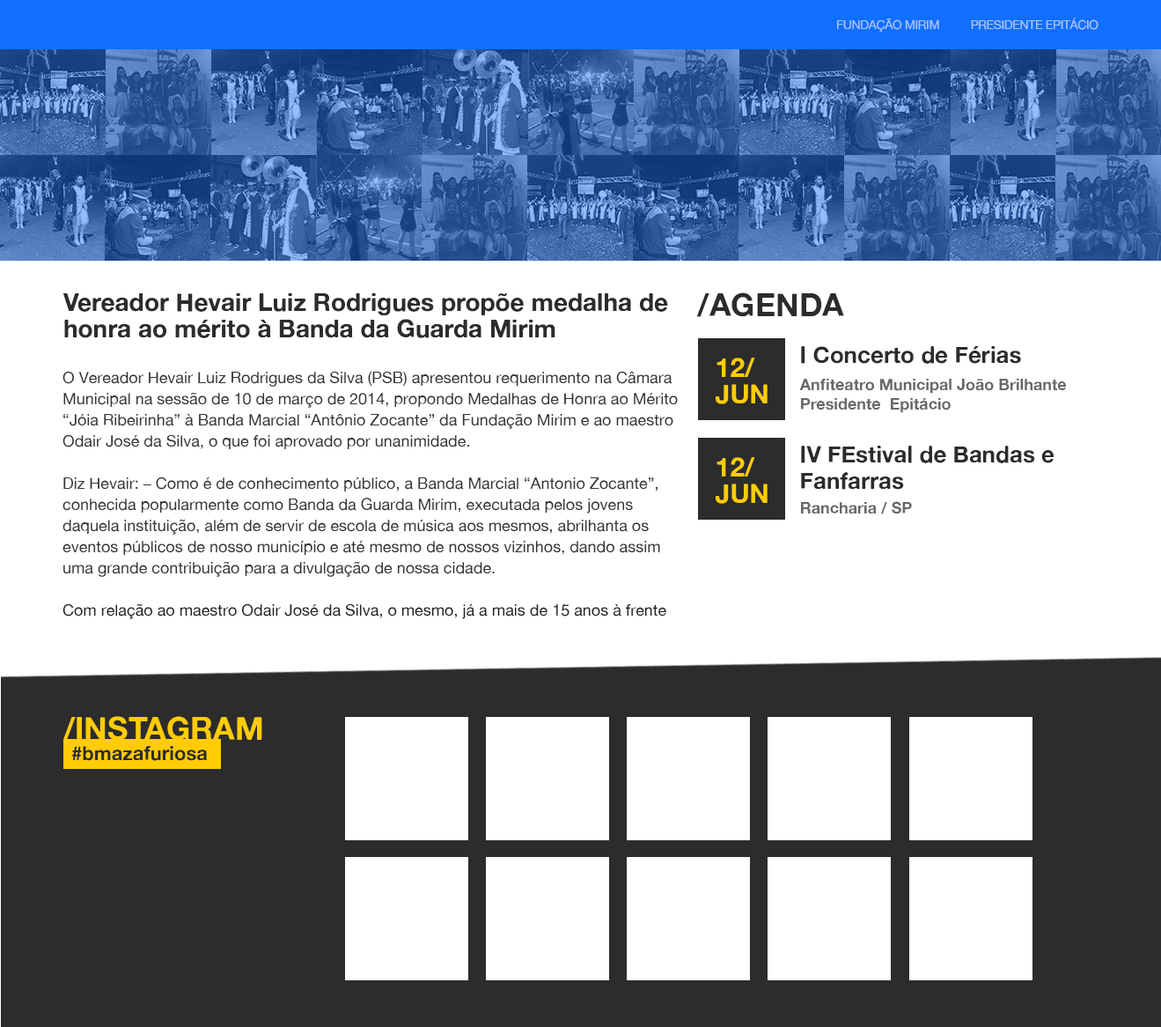
<style>
.page{position:relative;width:1161px;height:1027px;background:#ffffff}
.page>*{position:absolute;margin:0}
.t1{font:12.3px "AlteHaasGrotesk";letter-spacing:-0.025em;color:#adc5ff;text-transform:uppercase}
.t2{font:24.7px/26.4px "AlteHaasGrotesk_Bold";color:#222222}
.t3{font:31.7px "AlteHaasGrotesk_Bold";color:#2c2c2c}
.t4{font:22.9px "AlteHaasGrotesk_Bold";color:#2c2c2c}
.t5{font:26.4px/26.4px "AlteHaasGrotesk_Bold";color:#ffcc07}
.t6{font:15.8px/21.1px "AlteHaasGrotesk";color:#353535}
.t7{font:15.8px/21.1px "AlteHaasGrotesk";color:#222222}
.t8{font:15.8px "AlteHaasGrotesk_Bold";color:#686868}
.t9{font:22.9px/26.4px "AlteHaasGrotesk_Bold";color:#2c2c2c}
.t10{font:31.7px "AlteHaasGrotesk_Bold";color:#ffcc07}
.t11{font:19.4px "AlteHaasGrotesk_Bold";color:#2c2c2c}
</style>
<div class="page">
<p class="t1" style="left:837px;top:18px;width:262px;height:14px">FUNDAÇÃO MIRIM          PRESIDENTE EPITÁCIO</p>
<p class="t2" style="left:63px;top:293px;width:605px;height:45px">Vereador Hevair Luiz Rodrigues propõe medalha de honra ao mérito à Banda da Guarda Mirim</p>
<p class="t3" style="left:697px;top:292px;width:147px;height:25px">/AGENDA</p>
<p class="t4" style="left:801px;top:346px;width:220px;height:18px">I Concerto de Férias</p>
<p class="t5" style="left:715px;top:357px;width:53px;height:47px">12/<br>JUN</p>
<p class="t6" style="left:63px;top:371px;width:615px;height:248px">O Vereador Hevair Luiz Rodrigues da Silva (PSB) apresentou requerimento na Câmara Municipal na sessão de 10 de março de 2014, propondo Medalhas de Honra ao Mérito “Jóia Ribeirinha” à Banda Marcial “Antônio Zocante” da Fundação Mirim e ao maestro Odair José da Silva, o que foi aprovado por unanimidade.<br><br>Diz Hevair: – Como é de conhecimento público, a Banda Marcial “Antonio Zocante”, conhecida popularmente como Banda da Guarda Mirim, executada pelos jovens daquela instituição, além de servir de escola de música aos mesmos, abrilhanta os eventos públicos de nosso município e até mesmo de nossos vizinhos, dando assim uma grande contribuição para a divulgação de nossa cidade.<br><span class="t7"><br>Com relação ao maestro Odair José da Silva, o mesmo, já a mais de 15 anos à frente da Banda Marcial, além de ser um ótimo músico e professor, na condição de responsável pelo excelente desempenho da banda, tem se mostrado um grande regente, transmitindo elevados conhecimentos de música aos jovens da Guarda Mirim, contribuindo desta forma para a formação intelectual e moral dos nossos jovens e adolescentes, portanto merecedor desta homenagem da câmara.</span></p>
<p class="t8" style="left:800px;top:379px;width:266px;height:34px">Anfiteatro Municipal João Brilhante<br>Presidente  Epitácio</p>
<p class="t9" style="left:801px;top:446px;width:254px;height:44px">IV FEstival de Bandas e <br>Fanfarras</p>
<p class="t5" style="left:715px;top:457px;width:53px;height:47px">12/<br>JUN</p>
<p class="t8" style="left:801px;top:501px;width:111px;height:13px">Rancharia / SP</p>
<p class="t10" style="left:63px;top:716px;width:199px;height:25px">/INSTAGRAM</p>
<p class="t11" style="left:71px;top:746px;width:136px;height:15px">#bmazafuriosa</p>
</div>
